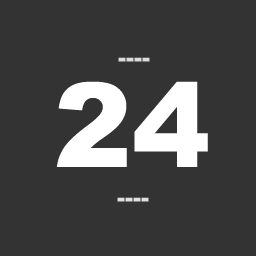
<style>
.page{position:relative;width:256px;height:256px;background:#333333}
.page>*{position:absolute;margin:0}
.t1{font:24px "Arial-Black";color:#dfdcdc}
.t2{font:117.1px "Arial-Black";color:#ffffff}
.t3{font:24px "Arial-Black";color:#e2e0e0}
</style>
<div class="page">
<p class="t1" style="left:118px;top:57px;width:32px;height:5px">----</p>
<p class="t2" style="left:56px;top:81px;width:152px;height:86px">24</p>
<p class="t3" style="left:117px;top:197px;width:32px;height:5px">----</p>
</div>
